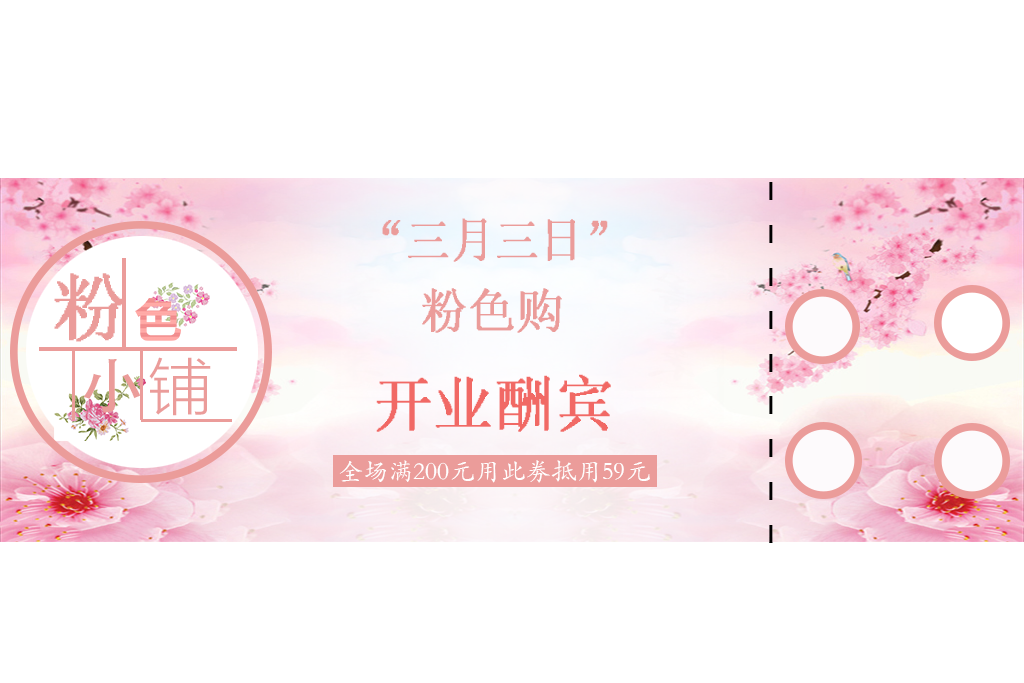
<style>
.page{position:relative;width:1024px;height:683px;background:#ffffff}
.page>*{position:absolute;margin:0}
.t1{font:76.2px "STKaiti";color:#000000}
.t2{font:48.7px "System";color:#eb9c9a;scale:0.9 1}
.t3{font:73.9px "System";color:#eb9c9a;scale:1.04 1}
.t4{font:48.4px "System";color:#eb9c9a}
.t5{font:61.6px "AdobeHeitiStd-Regular";color:#eb9c9a;scale:1.04 1}
.t6{font:61.6px "MicrosoftYaHeiUILight";color:#eb9c9a;scale:1.04 1}
.t7{font:61.7px "System";color:#f16965;scale:0.96 1}
.t8{font:25.4px "STKaiti";color:#ffffff}
</style>
<div class="page">
<p class="t1" style="left:769px;top:182px;width:4px;height:361px">- - - - - - - - -</p>
<p class="t2" style="left:382px;top:218px;width:226px;height:44px">“三月三日”</p>
<p class="t3" style="left:54px;top:273px;width:72px;height:69px">粉</p>
<p class="t4" style="left:422px;top:288px;width:140px;height:45px">粉色购</p>
<p class="t5" style="left:83px;top:359px;width:58px;height:54px">小</p>
<p class="t6" style="left:149px;top:357px;width:62px;height:59px">铺</p>
<p class="t7" style="left:376px;top:374px;width:235px;height:58px">开业酬宾</p>
<p class="t8" style="left:339px;top:460px;width:311px;height:23px">全场满200元用此劵抵用59元</p>
</div>
